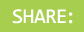
<style>
.page{position:relative;width:84px;height:32px;background:#a8ce50}
.page>*{position:absolute;margin:0}
.t1{font:21px "Consolas";color:#ffffff}
</style>
<div class="page">
<p class="t1" style="left:12px;top:9px;width:61px;height:15px">SHARE:</p>
</div>
